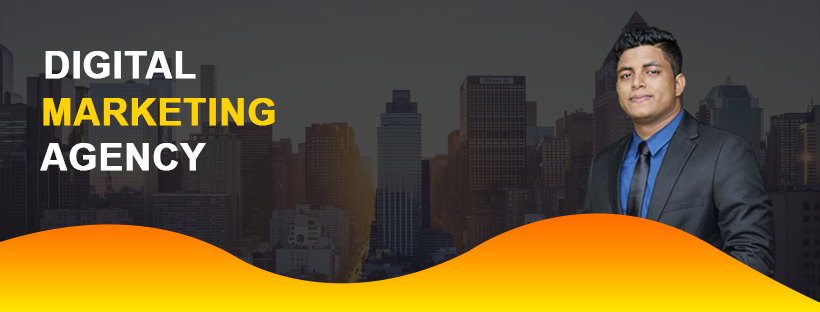
<style>
.page{position:relative;width:820px;height:312px}
.page>*{position:absolute;margin:0}
.t1{font:37.5px "Arial-BoldMT";color:#ffffff;font-weight:bold}
.t2{font:37.5px "Arial-BoldMT";color:#ffd200;font-weight:bold}
</style>
<div class="page">
<p class="t1" style="left:45px;top:51px;width:151px;height:28px">DIGITAL</p>
<p class="t2" style="left:43px;top:98px;width:232px;height:28px">MARKETING</p>
<p class="t1" style="left:40px;top:143px;width:166px;height:28px">AGENCY</p>
</div>
